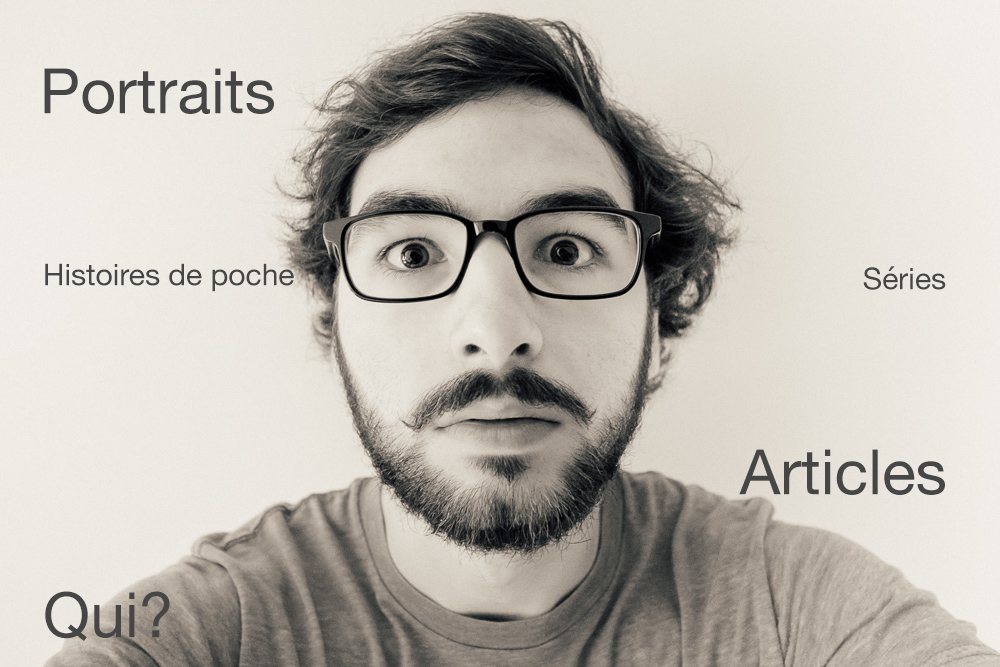
<style>
.page{position:relative;width:1000px;height:667px}
.page>*{position:absolute;margin:0}
.t1{font:62.5px "HelveticaNeue";color:#464646}
.t2{font:30px "HelveticaNeue";color:#464646}
</style>
<div class="page">
<p class="t1" style="left:44px;top:68px;width:230px;height:46px">Portraits</p>
<p class="t2" style="left:45px;top:263px;width:249px;height:29px">Histoires de poche</p>
<p class="t2" style="left:863px;top:266px;width:83px;height:24px">Séries</p>
<p class="t1" style="left:739px;top:449px;width:206px;height:46px">Articles</p>
<p class="t1" style="left:45px;top:591px;width:125px;height:50px">Qui?</p>
</div>
